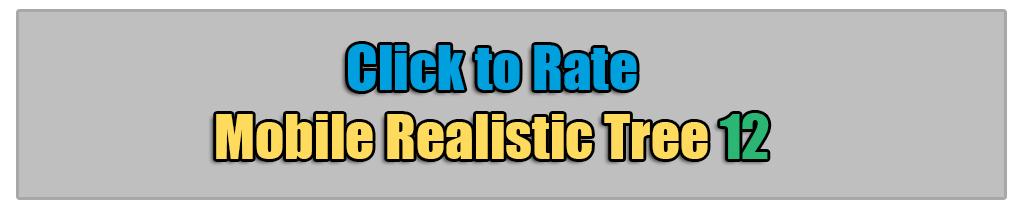
<style>
.page{position:relative;width:1024px;height:210px;background:#bfbfbf}
.page>*{position:absolute;margin:0}
.t1{font:57.3px "Impact";color:#ffdb5d}
.t2{font:57.3px "Impact";color:#009fde}
.t3{font:57.3px "Impact";color:#2cb673}
</style>
<div class="page">
<p class="t1" style="left:216px;top:44px;width:553px;height:115px;text-align:center"><span class="t2">Click to Rate<br></span>Mobile Realistic Tree <span class="t3">12</span></p>
</div>
